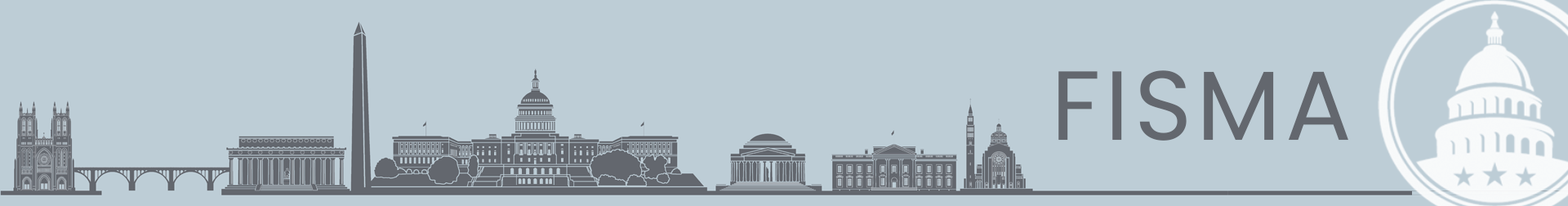
<style>
.page{position:relative;width:1568px;height:206px;background:#bdcdd6}
.page>*{position:absolute;margin:0}
.t1{font:98px "Poppins-Regular";letter-spacing:0.05em;color:#63676e}
</style>
<div class="page">
<p class="t1" style="left:1058px;top:70px;width:290px;height:70px">FISMA</p>
</div>
